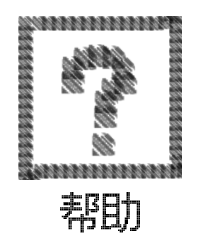
<style>
.page{position:relative;width:200px;height:250px;background:#ffffff}
.page>*{position:absolute;margin:0}
.t1{font:40.9px "FZXS24--GB1-0";color:#000000}
</style>
<div class="page">
<p class="t1" style="left:60px;top:192px;width:80px;height:41px">帮助</p>
</div>
